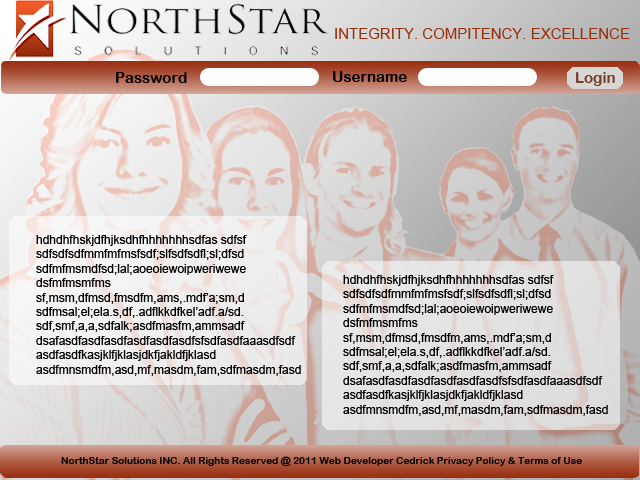
<style>
.page{position:relative;width:640px;height:480px}
.page>*{position:absolute;margin:0}
.t1{font:15px "ArialMT";color:#992e0a}
.t2{font:15px "ArialRoundedMTBold";color:#000000}
.t3{font:15px "ArialRoundedMTBold";color:#773d29}
.t4{font:12px "ArialMT";color:#000000}
.t5{font:10px "ArialRoundedMTBold";color:#000000}
</style>
<div class="page">
<p class="t1" style="left:335px;top:28px;width:295px;height:11px">INTEGRITY. COMPITENCY. EXCELLENCE</p>
<p class="t2" style="left:116px;top:72px;width:71px;height:11px">Password</p>
<p class="t2" style="left:333px;top:71px;width:74px;height:11px">Username</p>
<p class="t3" style="left:576px;top:72px;width:39px;height:14px">Login</p>
<p class="t4" style="left:36px;top:235px;width:265px;height:141px">hdhdhfhskjdfhjksdhfhhhhhhhsdfas sdfsf<br>sdfsdfsdfmmfmfmsfsdf;slfsdfsdfl;sl;dfsd<br>sdfmfmsmdfsd;lal;aoeoiewoipweriwewe<br>dsfmfmsmfms<br>sf,msm,dfmsd,fmsdfm,ams,.mdf’a;sm,d<br>sdfmsal;el;ela.s,df,.adflkkdfkel’adf.a/sd.<br>sdf,smf,a,a,sdfalk;asdfmasfm,ammsadf<br>dsafasdfasdfasdfasdfasdfasdfsfsdfasdfaaasdfsdf<br>asdfasdfkasjklfjklasjdkfjakldfjklasd<br>asdfmnsmdfm,asd,mf,masdm,fam,sdfmasdm,fasd</p>
<p class="t4" style="left:343px;top:275px;width:265px;height:141px">hdhdhfhskjdfhjksdhfhhhhhhhsdfas sdfsf<br>sdfsdfsdfmmfmfmsfsdf;slfsdfsdfl;sl;dfsd<br>sdfmfmsmdfsd;lal;aoeoiewoipweriwewe<br>dsfmfmsmfms<br>sf,msm,dfmsd,fmsdfm,ams,.mdf’a;sm,d<br>sdfmsal;el;ela.s,df,.adflkkdfkel’adf.a/sd.<br>sdf,smf,a,a,sdfalk;asdfmasfm,ammsadf<br>dsafasdfasdfasdfasdfasdfasdfsfsdfasdfaaasdfsdf<br>asdfasdfkasjklfjklasjdkfjakldfjklasd<br>asdfmnsmdfm,asd,mf,masdm,fam,sdfmasdm,fasd</p>
<p class="t5" style="left:61px;top:456px;width:521px;height:11px">NorthStar Solutions INC. All Rights Reserved @ 2011 Web Developer Cedrick Privacy Policy &amp; Terms of Use</p>
</div>
